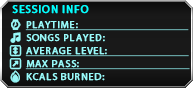
<style>
.page{position:relative;width:193px;height:88px;background:#191919}
.page>*{position:absolute;margin:0}
.t1{font:11px "MyriadPro-Regular";letter-spacing:0.05em;color:#00ffff;text-transform:uppercase;font-weight:bold}
.t2{font:10px/13px "MyriadPro-Regular";letter-spacing:0.05em;color:#99f9f9;text-transform:uppercase;font-weight:bold;text-decoration:underline}
.t3{font:10px/13px "SegoeUIEmoji";letter-spacing:0.05em;color:#99f9f9;text-transform:uppercase;font-weight:bold}
.t4{font:10px/13px "MyriadPro-Regular";letter-spacing:0.05em;color:#99f9f9;text-transform:uppercase;font-weight:bold}
.t5{font:9px "MyriadPro-Regular";letter-spacing:0.05em;color:#99f9f9;text-transform:uppercase;font-weight:bold}
</style>
<div class="page">
<p class="t1" style="left:12px;top:5px;width:77px;height:9px">SESSION INFO</p>
<p class="t2" style="left:9px;top:19px;width:181px;height:64px"><span class="t3">⌚ </span>PLAYTIME:                                      <br><span class="t3">🎵</span><span class="t4"> SONGS PLAYED:                               <br></span><span class="t3">↕️ </span>AVERAGE LEVEL:                            <br><span class="t3">↗ </span>MAX PASS:                                      <br><span class="t3">🔥</span><span class="t4"> KCALS BURNED:<br></span><span class="t5"></span></p>
</div>
